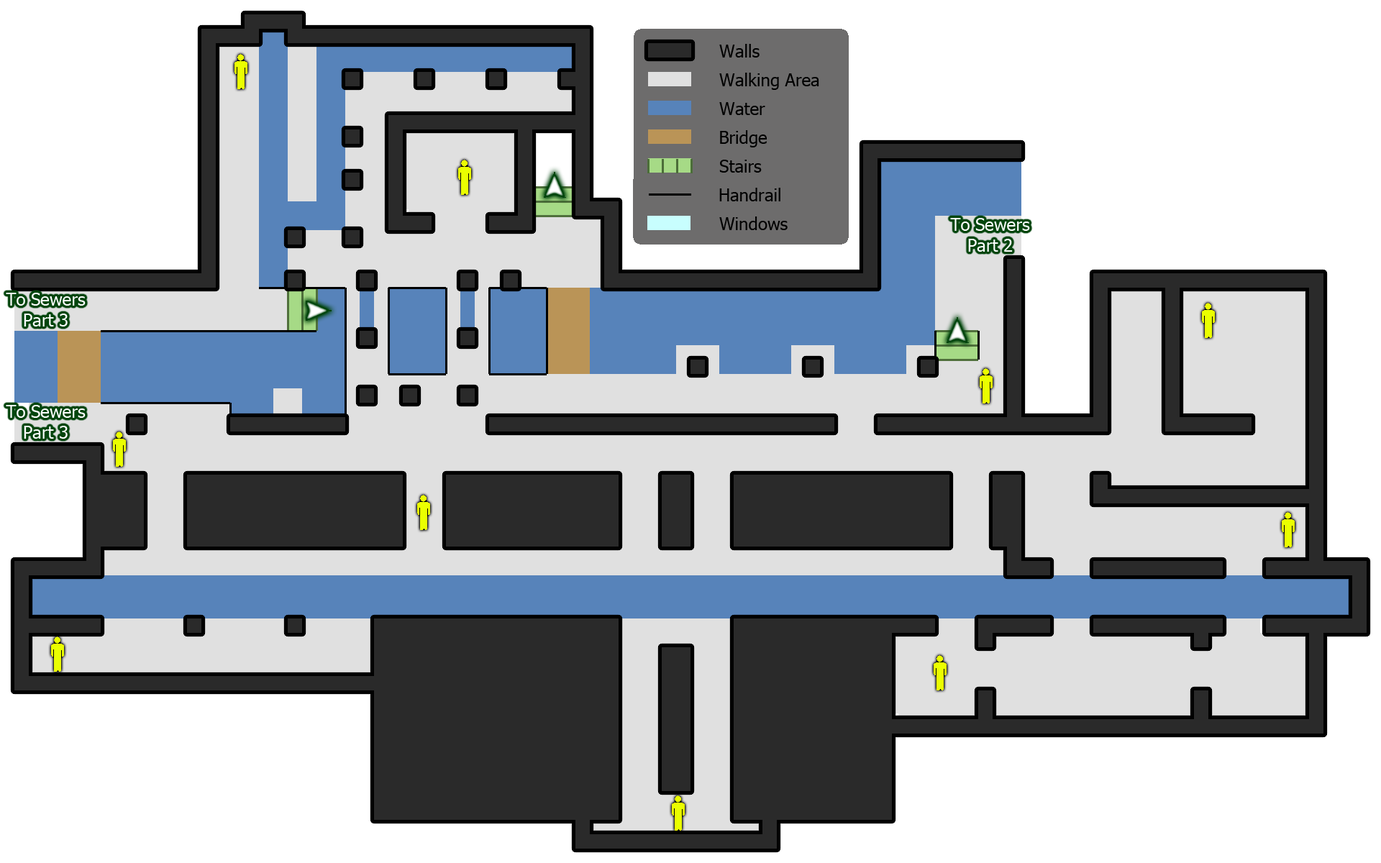
<style>
.page{position:relative;width:1381px;height:863px;background:#ffffff}
.page>*{position:absolute;margin:0}
.t1{font:17.3px "Tahoma";color:#000000}
.t2{font:17.3px "Tahoma";color:#ffffff}
</style>
<div class="page">
<p class="t1" style="left:719px;top:44px;width:41px;height:14px">Walls</p>
<p class="t1" style="left:719px;top:73px;width:100px;height:17px">Walking Area</p>
<p class="t1" style="left:719px;top:102px;width:46px;height:13px">Water</p>
<p class="t1" style="left:720px;top:130px;width:47px;height:17px">Bridge</p>
<p class="t1" style="left:719px;top:160px;width:43px;height:13px">Stairs</p>
<p class="t1" style="left:719px;top:188px;width:62px;height:13px">Handrail</p>
<p class="t1" style="left:719px;top:217px;width:69px;height:13px">Windows</p>
<p class="t2" style="left:950px;top:218px;width:80px;height:34px;text-align:center">To Sewers Part 2</p>
<p class="t2" style="left:6px;top:293px;width:80px;height:34px;text-align:center">To Sewers Part 3</p>
<p class="t2" style="left:6px;top:405px;width:80px;height:34px;text-align:center">To Sewers Part 3</p>
</div>
